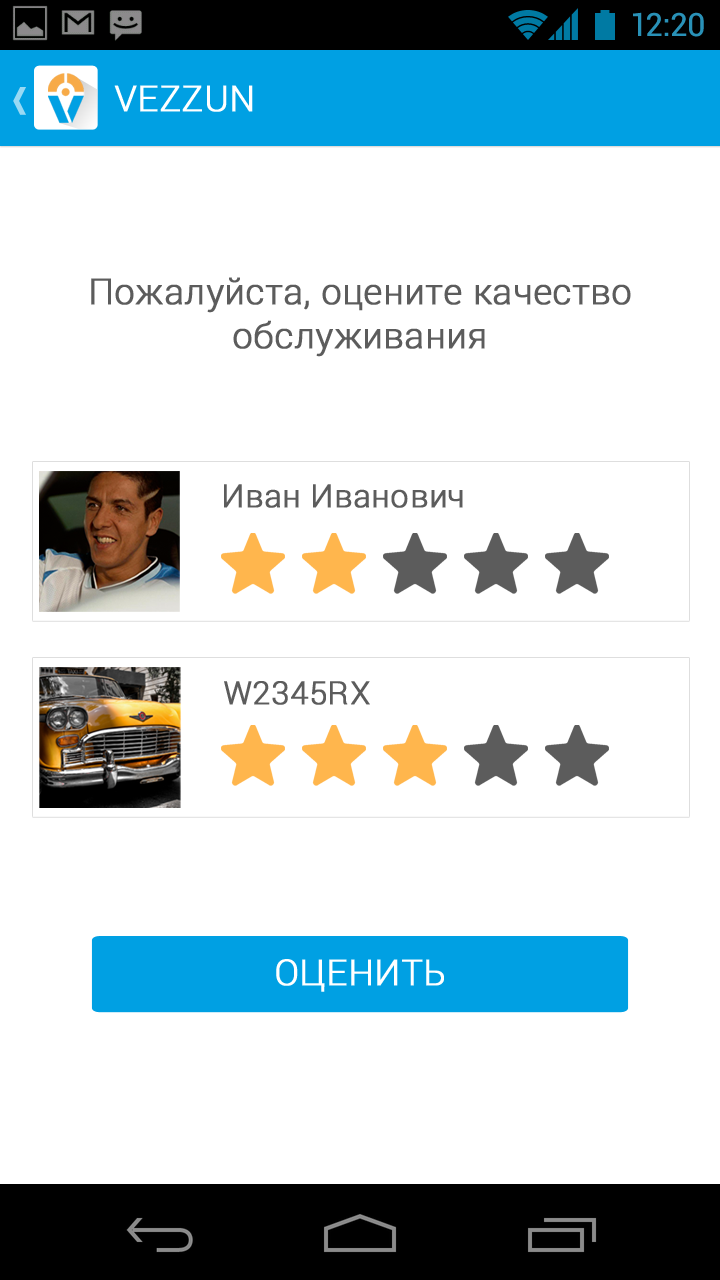
<style>
.page{position:relative;width:720px;height:1280px;background:#ffffff}
.page>*{position:absolute;margin:0}
.t1{font:32px "Roboto-Regular";color:#2991b7}
.t2{font:36px "Roboto-Light";color:#ffffff;text-transform:uppercase;font-weight:bold}
.t3{font:36px "Roboto-Light";color:#5c5c5c;font-weight:bold}
.t4{font:32px "Roboto-Light";letter-spacing:0.01em;color:#5c5c5c;font-weight:bold}
.t5{font:32px "Roboto-Light";letter-spacing:0.01em;color:#5c5c5c;text-transform:uppercase;font-weight:bold}
.t6{font:36px "Roboto-Light";color:#ffffff;font-weight:bold}
</style>
<div class="page">
<p class="t1" style="left:633px;top:12px;width:71px;height:25px">12:20</p>
<p class="t2" style="left:114px;top:85px;width:139px;height:27px">Vezzun</p>
<p class="t3" style="left:91px;top:277px;width:540px;height:80px;text-align:center">Пожалуйста, оцените качество обслуживания</p>
<p class="t4" style="left:224px;top:484px;width:239px;height:24px">Иван Иванович</p>
<p class="t5" style="left:224px;top:681px;width:146px;height:24px">w2345rx</p>
<p class="t6" style="left:276px;top:959px;width:168px;height:33px">ОЦЕНИТЬ</p>
</div>
